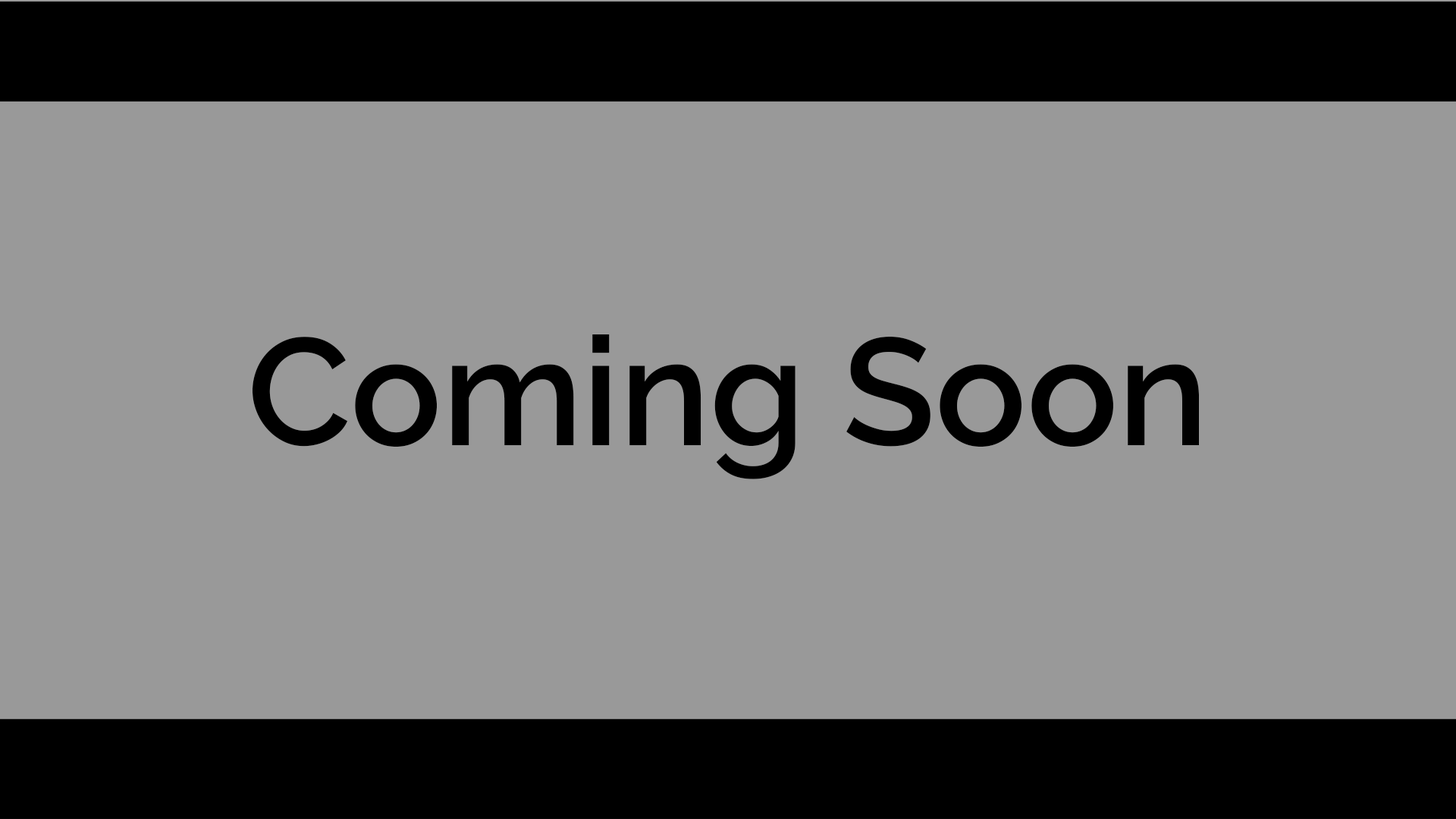
<style>
.page{position:relative;width:1456px;height:819px;background:#999999}
.page>*{position:absolute;margin:0}
.t1{font:151.7px "Raleway-SemiBold";color:#000000}
</style>
<div class="page">
<p class="t1" style="left:253px;top:334px;width:946px;height:145px">Coming Soon</p>
</div>
